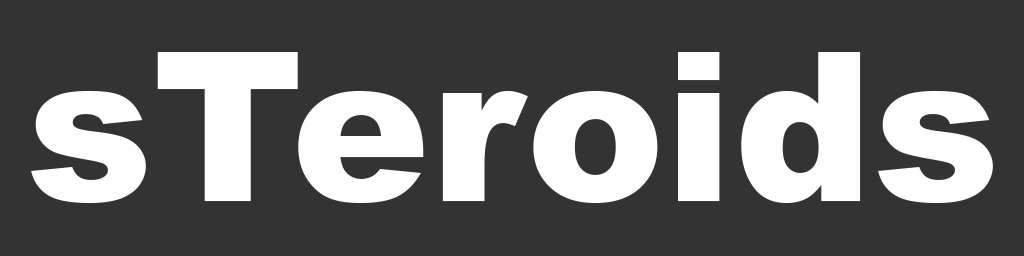
<style>
.page{position:relative;width:1024px;height:256px;background:#333333}
.page>*{position:absolute;margin:0}
.t1{font:208.3px "Arial-Black";color:#ffffff}
</style>
<div class="page">
<p class="t1" style="left:31px;top:52px;width:962px;height:151px">sTeroids</p>
</div>
